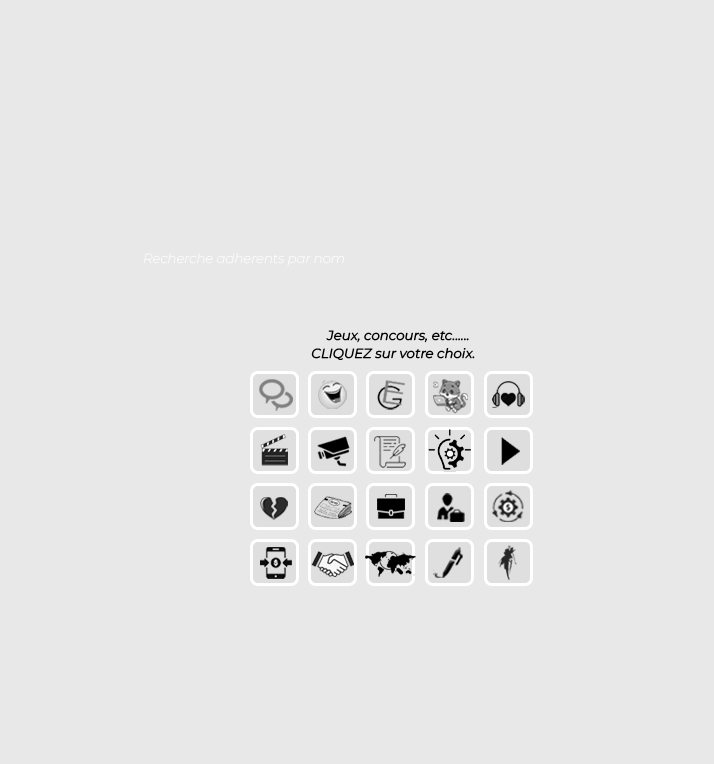
<style>
.page{position:relative;width:714px;height:764px;background:#e8e8e8}
.page>*{position:absolute;margin:0}
.t1{font:13.3px "Montserrat-ThinItalic";color:#ffffff}
.t2{font:13.3px "MontserratItalic-Italic";color:#000000}
</style>
<div class="page">
<p class="t1" style="left:143px;top:253px;width:201px;height:13px">Recherche adherents par nom</p>
<p class="t2" style="left:326px;top:330px;width:143px;height:13px">Jeux, concours, etc......</p>
<p class="t2" style="left:311px;top:348px;width:164px;height:12px">CLIQUEZ sur votre choix.</p>
</div>
